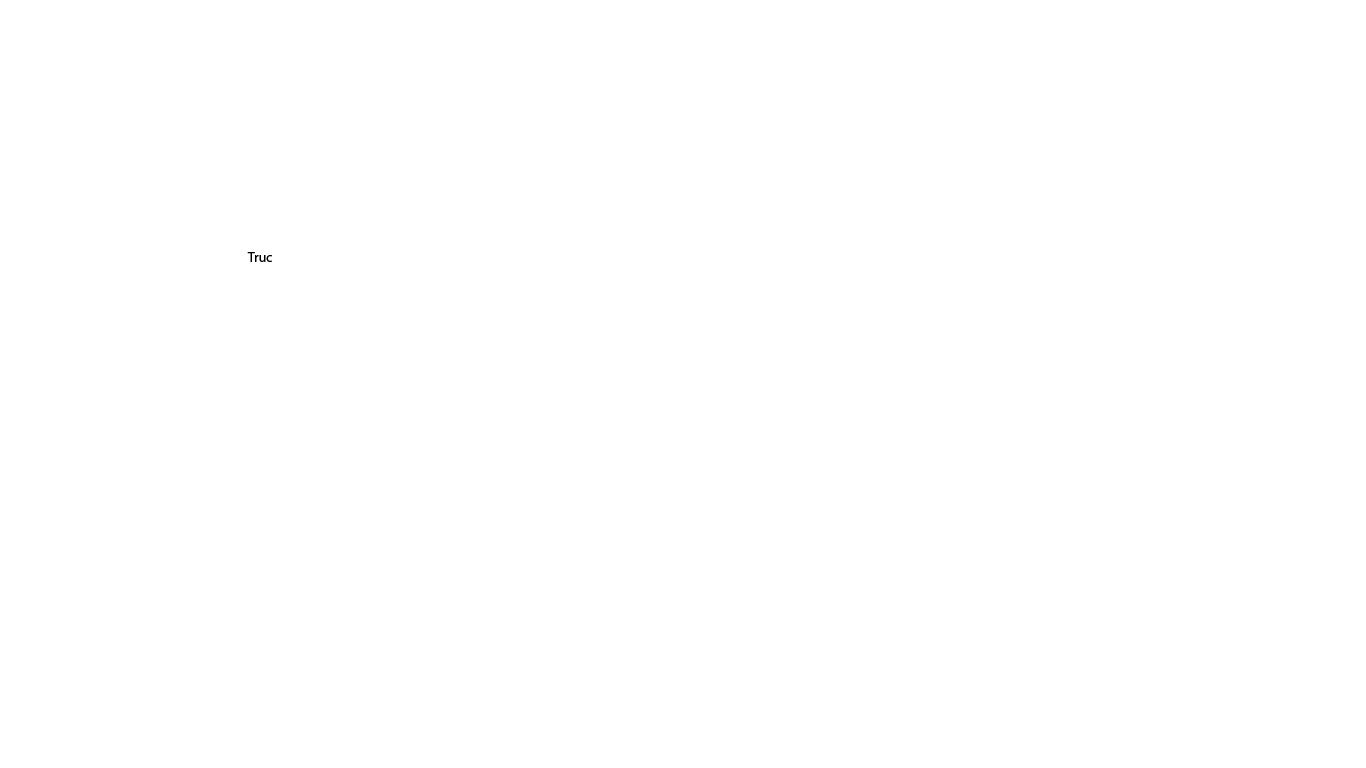
<style>
.page{position:relative;width:1366px;height:768px;background:#ffffff}
.page>*{position:absolute;margin:0}
.t1{font:14px "MyriadPro-Regular";color:#000000}
</style>
<div class="page">
<p class="t1" style="left:247px;top:252px;width:25px;height:10px">Truc</p>
</div>
